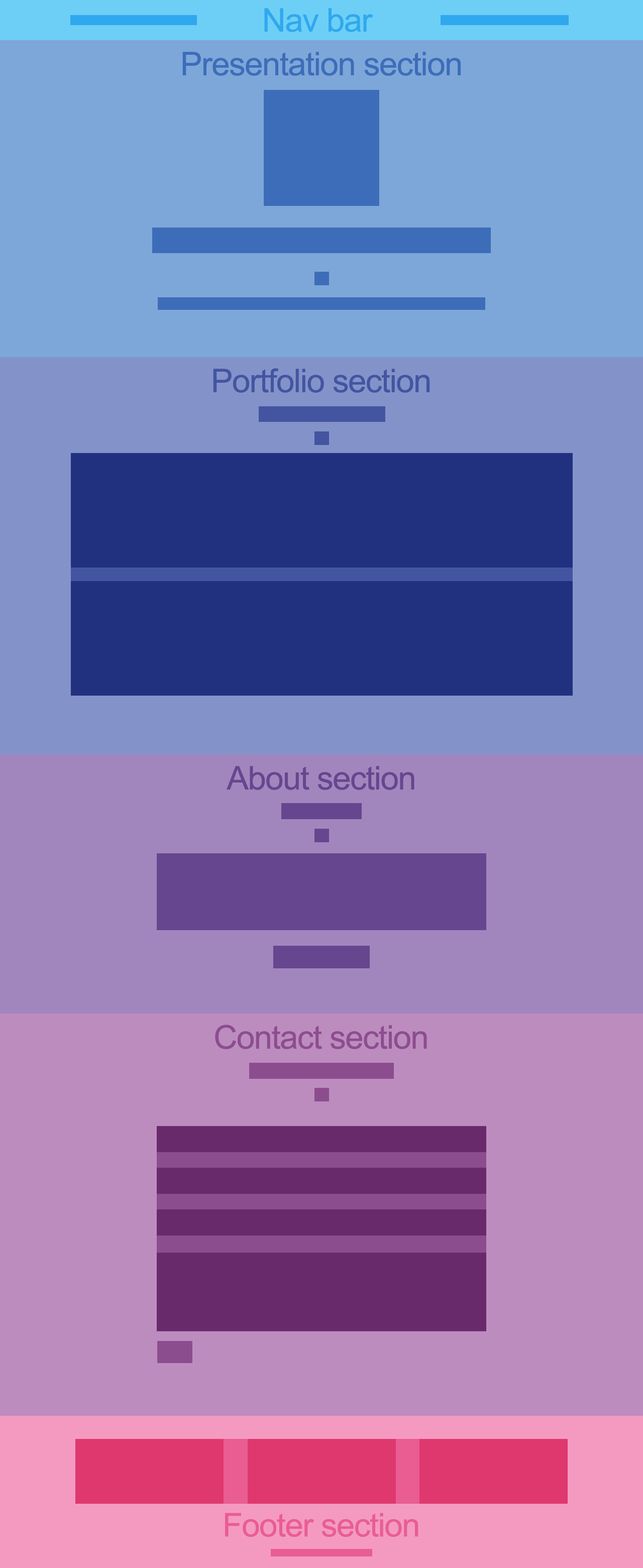
<style>
.page{position:relative;width:643px;height:1568px}
.page>*{position:absolute;margin:0}
.t1{font:32.5px "ArialMT";letter-spacing:-0.025em;color:#2fa8ed}
.t2{font:32.7px "ArialMT";letter-spacing:-0.025em;color:#3d6db9}
.t3{font:32.7px "ArialMT";letter-spacing:-0.025em;color:#4355a0}
.t4{font:32.7px "ArialMT";letter-spacing:-0.025em;color:#66468e}
.t5{font:32.7px "ArialMT";letter-spacing:-0.025em;color:#8c4d8f}
.t6{font:32.7px "ArialMT";letter-spacing:-0.025em;color:#e95d92}
</style>
<div class="page">
<p class="t1" style="left:264px;top:8px;width:109px;height:24px">Nav bar</p>
<p class="t2" style="left:182px;top:52px;width:279px;height:24px">Presentation section</p>
<p class="t3" style="left:213px;top:368px;width:217px;height:25px">Portfolio section</p>
<p class="t4" style="left:227px;top:766px;width:187px;height:24px">About section</p>
<p class="t5" style="left:215px;top:1025px;width:212px;height:24px">Contact section</p>
<p class="t6" style="left:225px;top:1513px;width:193px;height:24px">Footer section</p>
</div>
